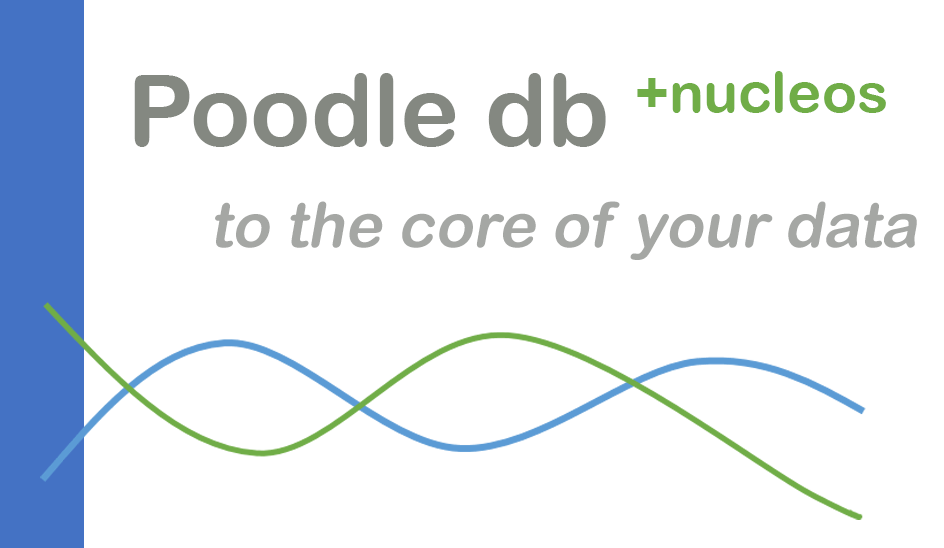
<style>
.page{position:relative;width:944px;height:548px;background:#ffffff}
.page>*{position:absolute;margin:0}
.t1{font:100px "ArialRoundedMTBold";color:#848881}
.t2{font:100px "ArialRoundedMTBold";color:#70ad47}
.t3{font:62.5px "ArialRoundedMTBold";color:#a5a7a4;font-style:italic}
</style>
<div class="page">
<p class="t1" style="left:134px;top:71px;width:752px;height:76px">Poodle db <span class="t2">+nucleos</span></p>
<p class="t3" style="left:215px;top:201px;width:702px;height:59px">to the core of your data</p>
</div>
